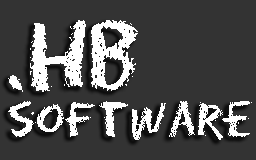
<style>
.page{position:relative;width:256px;height:160px;background:#333333}
.page>*{position:absolute;margin:0}
.t1{font:90px "Eraser-Regular";color:#ffffff}
.t2{font:45px "Eraser-Regular";color:#ffffff}
</style>
<div class="page">
<p class="t1" style="left:8px;top:20px;width:130px;height:72px">HB.</p>
<p class="t2" style="left:8px;top:101px;width:244px;height:39px">software</p>
</div>
